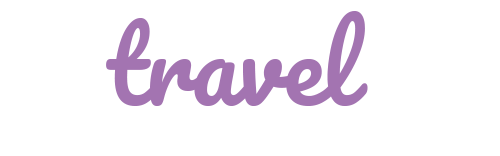
<style>
.page{position:relative;width:500px;height:156px;background:#ffffff}
.page>*{position:absolute;margin:0}
.t1{font:100px "Pacifico-Regular";color:#a374b1}
</style>
<div class="page">
<p class="t1" style="left:106px;top:11px;width:262px;height:95px">travel</p>
</div>
